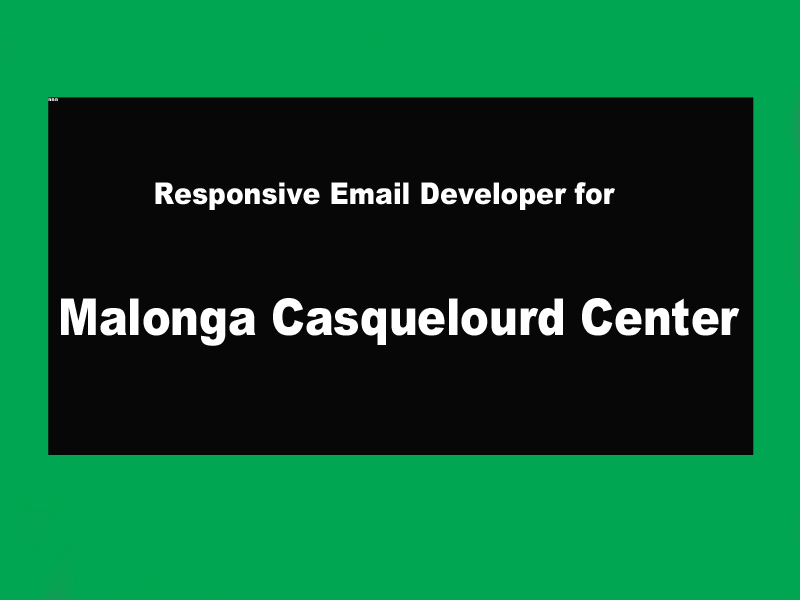
<style>
.page{position:relative;width:800px;height:600px;background:#070707}
.page>*{position:absolute;margin:0}
.t1{font:5px "Arial-Black";color:#ffffff}
.t2{font:30px "Arial-Black";color:#ffffff;scale:0.89 1}
.t3{font:51.1px "Arial-Black";color:#ffffff;scale:0.84 1}
</style>
<div class="page">
<p class="t1" style="left:48px;top:98px;width:10px;height:3px">nnn</p>
<p class="t2" style="left:155px;top:182px;width:460px;height:28px">Responsive Email Developer for</p>
<p class="t3" style="left:61px;top:298px;width:679px;height:48px">Malonga Casquelourd Center</p>
</div>
